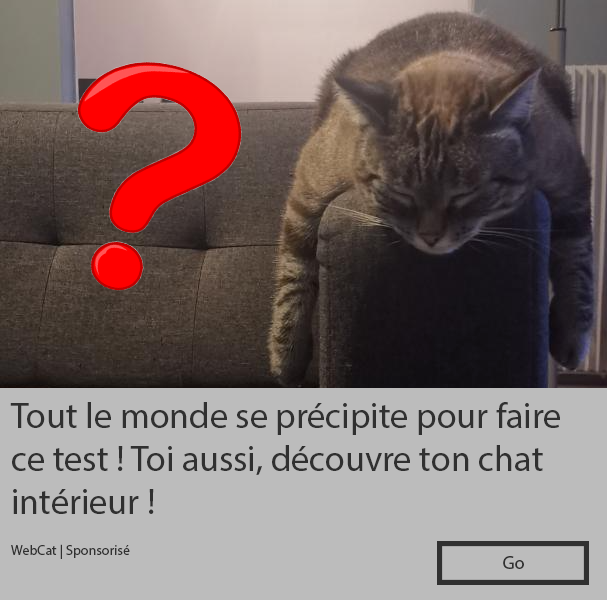
<style>
.page{position:relative;width:607px;height:600px;background:#bcbcbc}
.page>*{position:absolute;margin:0}
.t1{font:36px "MyriadPro-Regular";color:#303030}
.t2{font:14px "MyriadPro-Regular";color:#303030}
.t3{font:18px "MyriadPro-Regular";color:#303030}
</style>
<div class="page">
<p class="t1" style="left:10px;top:402px;width:550px;height:112px">Tout le monde se précipite pour faire ce test ! Toi aussi, découvre ton chat intérieur !</p>
<p class="t2" style="left:11px;top:544px;width:119px;height:15px">WebCat | Sponsorisé</p>
<p class="t3" style="left:503px;top:556px;width:21px;height:13px">Go</p>
</div>
